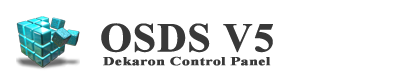
<style>
.page{position:relative;width:400px;height:82px;background:#ffffff}
.page>*{position:absolute;margin:0}
.t1{font:41px "TimesNewRomanPS-BoldMT";color:#383838;font-weight:bold}
.t2{font:12px "TimesNewRomanPS-BoldMT";color:#383838;font-weight:bold;scale:1.33 1}
</style>
<div class="page">
<p class="t1" style="left:101px;top:23px;width:172px;height:30px">OSDS V5</p>
<p class="t2" style="left:103px;top:56px;width:168px;height:10px">Dekaron Control Panel</p>
</div>
